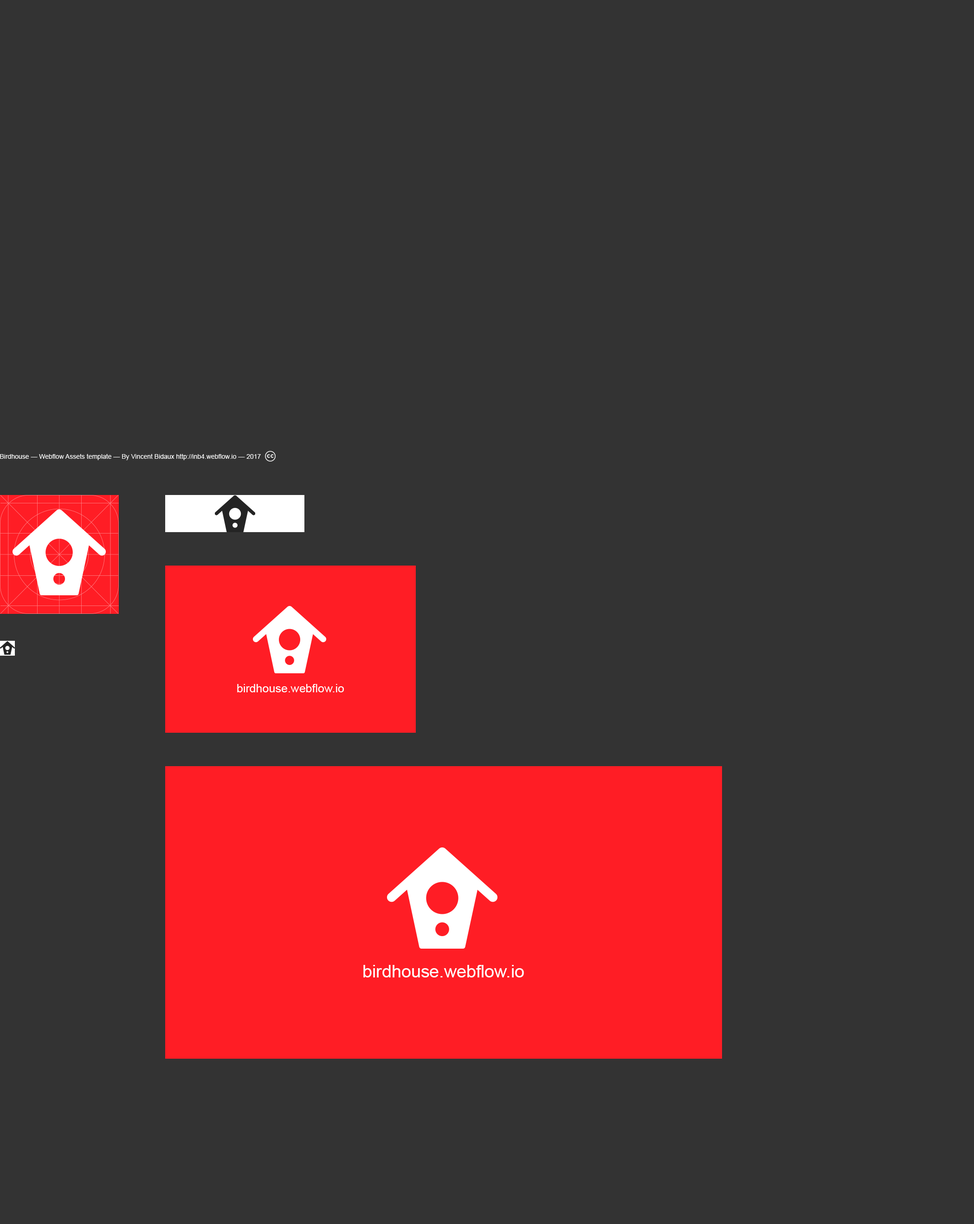
<style>
.page{position:relative;width:974px;height:1224px;background:#333333}
.page>*{position:absolute;margin:0}
.t1{font:6.5px "ArialMT";color:#ffffff}
.t2{font:11.6px "ArialMT";color:#fefefe}
.t3{font:17.4px "ArialMT";color:#fefefe}
</style>
<div class="page">
<p class="t1" style="left:0px;top:454px;width:261px;height:6px">Birdhouse — Webflow Assets template — By Vincent Bidaux http://inb4.webflow.io — 2017</p>
<p class="t2" style="left:237px;top:684px;width:107px;height:8px">birdhouse.webflow.io</p>
<p class="t3" style="left:363px;top:965px;width:161px;height:12px">birdhouse.webflow.io</p>
</div>
